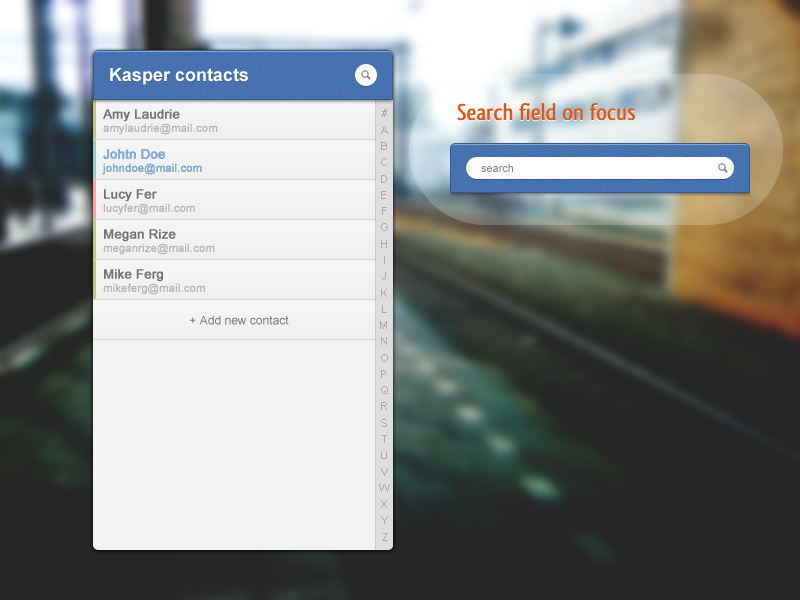
<style>
.page{position:relative;width:800px;height:600px}
.page>*{position:absolute;margin:0}
.t1{font:18px "Arial-BoldMT";color:#ffffff}
.t2{font:11px "ArialMT";color:#b5b5b5;font-weight:bold}
.t3{font:13px "ArialMT";color:#727272;font-weight:bold}
.t4{font:11px "ArialMT";letter-spacing:0.48em;color:#aaaaaa;text-transform:uppercase}
.t5{font:24px "QlassikBold";color:#e05612}
.t6{font:11px "ArialMT";color:#80abd4;font-weight:bold}
.t7{font:13px "ArialMT";color:#80abd4;font-weight:bold}
.t8{font:11px "ArialMT";color:#858585}
.t9{font:12px "ArialMT";color:#787878}
</style>
<div class="page">
<p class="t1" style="left:110px;top:68px;width:138px;height:17px">Kasper contacts</p>
<p class="t2" style="left:103px;top:109px;width:115px;height:26px"><span class="t3">Amy Laudrie<br></span>amylaudrie@mail.com</p>
<p class="t4" style="left:379px;top:109px;width:11px;height:432px">#abcdefghijklmnopqrstuvwxyz</p>
<p class="t5" style="left:457px;top:103px;width:178px;height:18px">Search field on focus</p>
<p class="t6" style="left:102px;top:149px;width:100px;height:26px"><span class="t7">Johtn Doe<br></span>johndoe@mail.com</p>
<p class="t6" style="left:102px;top:149px;width:100px;height:26px"><span class="t7">Johtn Doe<br></span>johndoe@mail.com</p>
<p class="t8" style="left:481px;top:164px;width:32px;height:8px">search</p>
<p class="t2" style="left:103px;top:189px;width:92px;height:26px"><span class="t3">Lucy Fer<br></span>lucyfer@mail.com</p>
<p class="t2" style="left:103px;top:229px;width:112px;height:26px"><span class="t3">Megan Rize<br></span>meganrize@mail.com</p>
<p class="t2" style="left:103px;top:269px;width:102px;height:26px"><span class="t3">Mike Ferg<br></span>mikeferg@mail.com</p>
<p class="t9" style="left:190px;top:315px;width:99px;height:10px">+ Add new contact</p>
</div>
